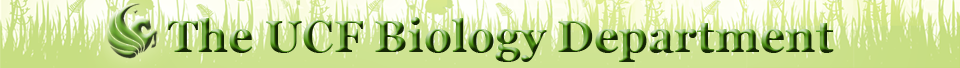
<style>
.page{position:relative;width:960px;height:68px}
.page>*{position:absolute;margin:0}
.t1{font:44.5px "Georgia-Bold"}
</style>
<div class="page">
<p class="t1" style="left:168px;top:17px;width:666px;height:45px">The UCF Biology Department</p>
</div>
